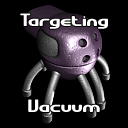
<style>
.page{position:relative;width:128px;height:128px;background:#000000}
.page>*{position:absolute;margin:0}
.t1{font:18px "GravitateBRK";color:#ffffff}
</style>
<div class="page">
<p class="t1" style="left:20px;top:13px;width:88px;height:16px">Targeting</p>
<p class="t1" style="left:28px;top:99px;width:72px;height:13px">Vacuum</p>
</div>
